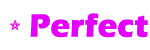
<style>
.page{position:relative;width:150px;height:50px;background:#ffffff}
.page>*{position:absolute;margin:0}
.t1{font:33.3px "ErasITC-Bold";color:#e400ff}
</style>
<div class="page">
<p class="t1" style="left:30px;top:13px;width:118px;height:25px">Perfect</p>
</div>
